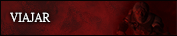
<style>
.page{position:relative;width:177px;height:36px}
.page>*{position:absolute;margin:0}
.t1{font:12px "PMingLiU-ExtB";color:#ffffff}
</style>
<div class="page">
<p class="t1" style="left:10px;top:12px;width:41px;height:10px">VIAJAR</p>
</div>
